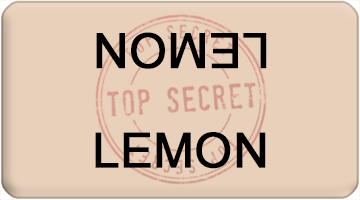
<style>
.page{position:relative;width:360px;height:200px;background:#e8d0bb}
.page>*{position:absolute;margin:0}
.t1{font:48px "ArialMT";color:#000000;font-weight:bold}
</style>
<div class="page">
<p class="t1" style="left:96px;top:32px;width:171px;height:37px;rotate:180deg">LEMON</p>
<p class="t1" style="left:95px;top:132px;width:171px;height:37px">LEMON</p>
</div>
